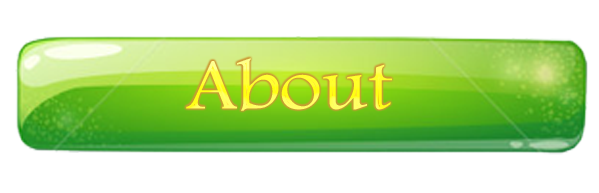
<style>
.page{position:relative;width:599px;height:193px;background:#ffffff}
.page>*{position:absolute;margin:0}
.t1{font:72.9px "K-Sina";scale:1.16 1}
</style>
<div class="page">
<p class="t1" style="left:186px;top:58px;width:206px;height:53px">About</p>
</div>
